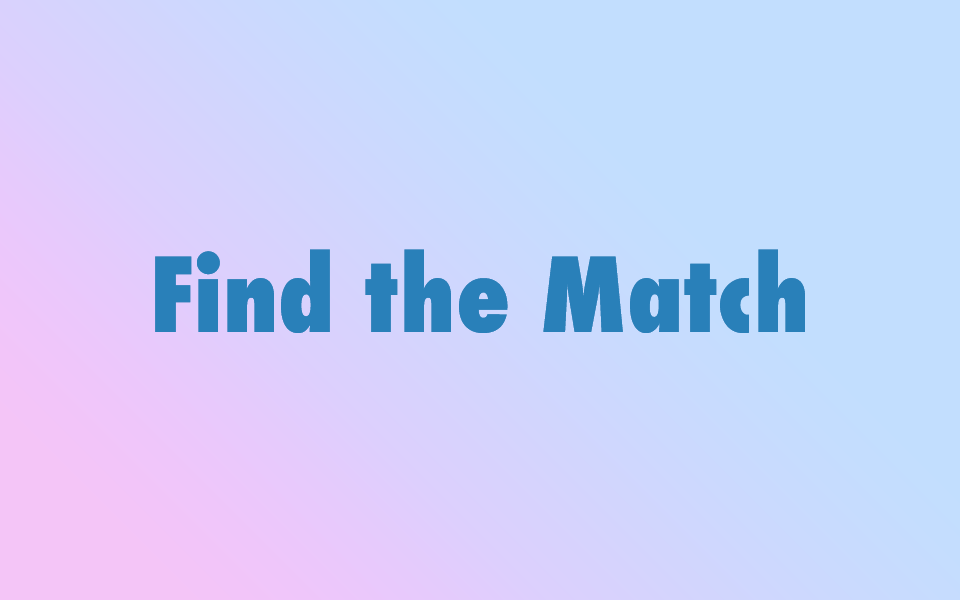
<style>
.page{position:relative;width:960px;height:600px;background:#c2defe}
.page>*{position:absolute;margin:0}
.t1{font:100px "Futura-CondensedExtraBold";color:#2980b9}
</style>
<div class="page">
<p class="t1" style="left:155px;top:249px;width:650px;height:84px">Find the Match</p>
</div>
